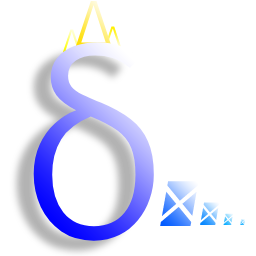
<style>
.page{position:relative;width:256px;height:256px;background:#ffffff}
.page>*{position:absolute;margin:0}
.t1{font:64px "FiraCode-Light"}
.t2{font:32px "FiraCode-Light"}
.t3{font:64px "MonoLisa-LightItalic"}
.t4{font:32px "MonoLisa-LightItalic"}
.t5{font:16px "MonoLisa-LightItalic"}
.t6{font:8px "MonoLisa-LightItalic"}
</style>
<div class="page">
<p class="t1" style="left:75px;top:0px;width:37px;height:46px">Δ</p>
<p class="t2" style="left:103px;top:26px;width:19px;height:23px">Δ</p>
<p class="t3" style="left:160px;top:181px;width:39px;height:45px">Δ</p>
<p class="t4" style="left:200px;top:202px;width:20px;height:23px">Δ</p>
<p class="t5" style="left:223px;top:213px;width:11px;height:12px">Δ</p>
<p class="t6" style="left:240px;top:219px;width:6px;height:6px">Δ</p>
</div>
